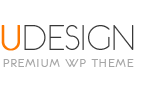
<style>
.page{position:relative;width:150px;height:85px;background:#ffffff}
.page>*{position:absolute;margin:0}
.t1{font:41px "Eurofurencelight";color:#383838}
.t2{font:41px "Eurofurencelight";color:#fd7800;font-weight:bold}
.t3{font:12.6px "Eurofurenceregular";letter-spacing:0.1em;color:#a6a6a6;text-transform:uppercase;scale:1.11 1}
</style>
<div class="page">
<p class="t1" style="left:1px;top:25px;width:133px;height:26px"><span class="t2">U</span>DESIGN</p>
<p class="t3" style="left:3px;top:59px;width:131px;height:8px">PREMIUM WP THEME</p>
</div>
